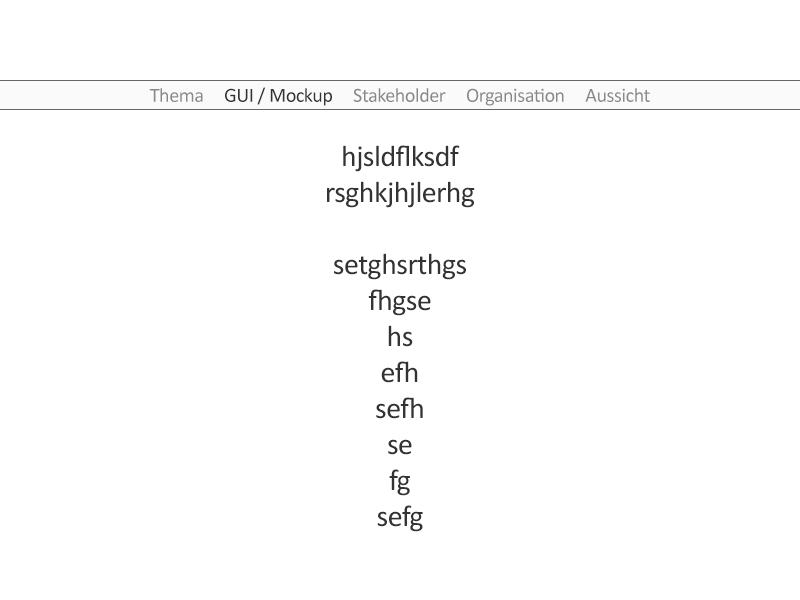
<style>
.page{position:relative;width:800px;height:600px;background:#ffffff}
.page>*{position:absolute;margin:0}
.t1{font:20px "Calibri";letter-spacing:-0.02em;color:#888888}
.t2{font:20px "Calibri";letter-spacing:-0.02em;color:#333333}
.t3{font:30px "Calibri";letter-spacing:-0.02em;color:#333333}
</style>
<div class="page">
<p class="t1" style="left:149px;top:87px;width:501px;height:19px">Thema     <span class="t2">GUI / Mockup</span>     Stakeholder     Organisation     Aussicht</p>
<p class="t3" style="left:327px;top:145px;width:148px;height:387px;text-align:center">hjsldflksdf<br>rsghkjhjlerhg<br><br>setghsrthgs<br>fhgse<br>hs<br>efh<br>sefh<br>se<br>fg<br>sefg</p>
</div>
